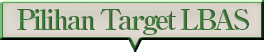
<style>
.page{position:relative;width:264px;height:52px;background:#ffffff}
.page>*{position:absolute;margin:0}
.t1{font:28px "RyuminPro-ExBold";letter-spacing:-0.1em;color:#3f723a}
</style>
<div class="page">
<p class="t1" style="left:17px;top:9px;width:232px;height:26px">Pilihan Target LBAS</p>
</div>
